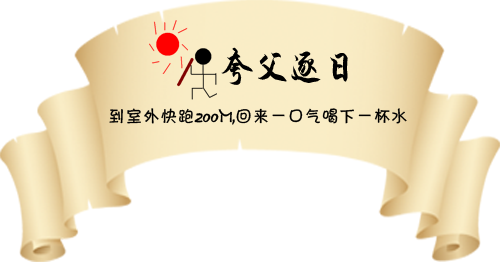
<style>
.page{position:relative;width:500px;height:262px;background:#ffffff}
.page>*{position:absolute;margin:0}
.t1{font:38.8px "HYi4gj";color:#000000;scale:0.89 1}
.t2{font:17.3px "Jkaton";color:#000000}
</style>
<div class="page">
<p class="t1" style="left:221px;top:47px;width:127px;height:38px">夸父逐日</p>
<p class="t2" style="left:109px;top:108px;width:298px;height:17px">到室外快跑200M,回来一口气喝下一杯水</p>
</div>
